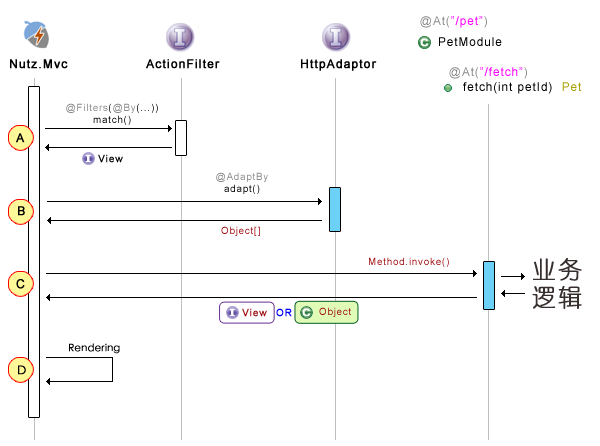
<style>
.page{position:relative;width:600px;height:446px;background:#ffffff}
.page>*{position:absolute;margin:0}
.t1{font:12px "ArialMT";letter-spacing:0.08em;color:#ff00ff}
.t2{font:12px "ArialMT";letter-spacing:0.08em;color:#898989}
.t3{font:12px "ArialMT";letter-spacing:0.08em;color:#000000}
.t4{font:12px "ArialMT";letter-spacing:0.08em;color:#000000;font-weight:bold}
.t5{font:12px "ArialMT";letter-spacing:0.08em;color:#aba000}
.t6{font:10px/12px "ArialMT";letter-spacing:0.08em;color:#000000}
.t7{font:10px/12px "ArialMT";letter-spacing:0.08em;color:#898989}
.t8{font:10px "ArialMT";letter-spacing:0.08em;color:#000000;font-weight:bold}
.t9{font:10px "ArialMT";letter-spacing:0.08em;color:#9e0b0f}
.t10{font:24px/28px "YouYuan";letter-spacing:0.08em;color:#362f2d;font-weight:bold}
.t11{font:10px "ArialMT";letter-spacing:0.08em;color:#9e0b0f;font-weight:bold}
.t12{font:10px "ArialMT";letter-spacing:0.08em;color:#0000ff;font-weight:bold}
.t13{font:10px "STXihei";color:#000000;font-weight:bold}
.t14{font:12px "STXihei";color:#000000;font-weight:bold}
</style>
<div class="page">
<p class="t1" style="left:420px;top:16px;width:67px;height:12px"><span class="t2">@At(</span>”/pet”<span class="t2">)</span></p>
<p class="t3" style="left:439px;top:37px;width:63px;height:9px">PetModule</p>
<p class="t4" style="left:10px;top:59px;width:58px;height:10px">Nutz.Mvc</p>
<p class="t4" style="left:146px;top:59px;width:74px;height:10px">ActionFilter</p>
<p class="t4" style="left:301px;top:59px;width:76px;height:12px">HttpAdaptor</p>
<p class="t1" style="left:449px;top:67px;width:78px;height:12px"><span class="t2">@At(</span>”/fetch”<span class="t2">)</span></p>
<p class="t3" style="left:463px;top:82px;width:119px;height:12px">fetch(int petId)  <span class="t5">Pet</span></p>
<p class="t6" style="left:66px;top:103px;width:92px;height:22px;text-align:center"><span class="t7">@Filters</span>(<span class="t7">@By</span>(...))<br>match()</p>
<p class="t4" style="left:16px;top:133px;width:9px;height:10px">A</p>
<p class="t8" style="left:98px;top:154px;width:25px;height:9px">View</p>
<p class="t7" style="left:216px;top:172px;width:52px;height:22px;text-align:center">@AdaptBy<span class="t6"><br>adapt()</span></p>
<p class="t4" style="left:18px;top:206px;width:7px;height:10px">B</p>
<p class="t9" style="left:221px;top:226px;width:39px;height:10px">Object[]</p>
<p class="t9" style="left:369px;top:257px;width:80px;height:10px">Method.invoke()</p>
<p class="t10" style="left:532px;top:258px;width:50px;height:51px">业务<br>逻辑</p>
<p class="t4" style="left:16px;top:279px;width:9px;height:10px">C</p>
<p class="t11" style="left:242px;top:308px;width:25px;height:9px">View</p>
<p class="t12" style="left:276px;top:308px;width:16px;height:9px">OR</p>
<p class="t9" style="left:319px;top:307px;width:32px;height:10px">Object</p>
<p class="t13" style="left:69px;top:343px;width:51px;height:11px">Rendering</p>
<p class="t14" style="left:18px;top:365px;width:8px;height:10px">D</p>
</div>
